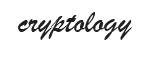
<style>
.page{position:relative;width:150px;height:60px;background:#ffffff}
.page>*{position:absolute;margin:0}
.t1{font:35px "BrushScriptMT";color:#202020}
</style>
<div class="page">
<p class="t1" style="left:18px;top:12px;width:114px;height:28px">cryptology</p>
</div>
